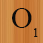
<style>
.page{position:relative;width:43px;height:43px}
.page>*{position:absolute;margin:0}
.t1{font:30px "TimesNewRomanPSMT";color:#0c0c0b}
.t2{font:12px "TimesNewRomanPSMT";color:#0c0c0b}
</style>
<div class="page">
<p class="t1" style="left:12px;top:8px;width:20px;height:20px">O</p>
<p class="t2" style="left:34px;top:28px;width:4px;height:9px">1</p>
</div>
